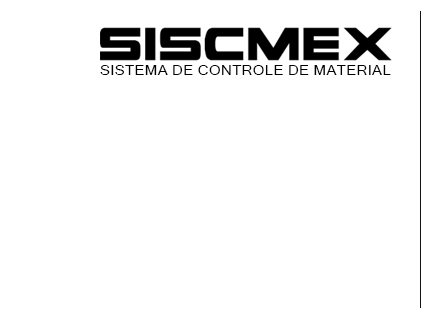
<style>
.page{position:relative;width:440px;height:316px;background:#ffffff}
.page>*{position:absolute;margin:0}
.t1{font:14px "MicrosoftSansSerif";color:#000000;scale:1.11 1}
</style>
<div class="page">
<p class="t1" style="left:100px;top:65px;width:291px;height:10px">SISTEMA DE CONTROLE DE MATERIAL</p>
</div>
